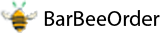
<style>
.page{position:relative;width:163px;height:33px;background:#ffffff}
.page>*{position:absolute;margin:0}
.t1{font:22px "MyriadPro-Regular";color:#000000}
</style>
<div class="page">
<p class="t1" style="left:44px;top:10px;width:116px;height:16px">BarBeeOrder</p>
</div>
